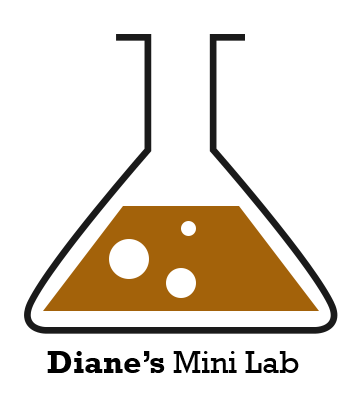
<style>
.page{position:relative;width:361px;height:407px;background:#ffffff}
.page>*{position:absolute;margin:0}
.t1{font:32px "Rockwell";color:#000000}
.t2{font:32px "Rockwell-Bold";color:#000000}
</style>
<div class="page">
<p class="t1" style="left:47px;top:351px;width:252px;height:22px"><span class="t2">Diane’s </span>Mini Lab</p>
</div>
